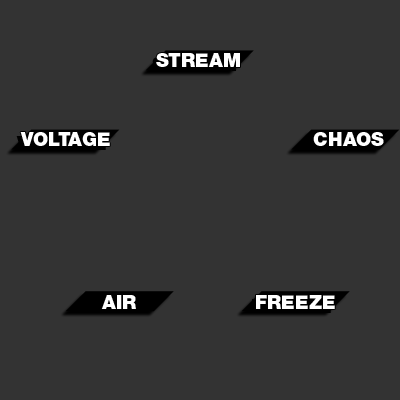
<style>
.page{position:relative;width:400px;height:400px;background:#333333}
.page>*{position:absolute;margin:0}
.t1{font:19.2px "HelveticaNeueLTW1G-Blk";color:#ffffff}
</style>
<div class="page">
<p class="t1" style="left:156px;top:53px;width:84px;height:14px">STREAM</p>
<p class="t1" style="left:20px;top:132px;width:90px;height:14px">VOLTAGE</p>
<p class="t1" style="left:313px;top:132px;width:71px;height:14px">CHAOS</p>
<p class="t1" style="left:101px;top:295px;width:35px;height:14px">AIR</p>
<p class="t1" style="left:256px;top:295px;width:79px;height:14px">FREEZE</p>
</div>
